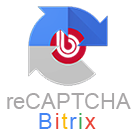
<style>
.page{position:relative;width:135px;height:135px;background:#ffffff}
.page>*{position:absolute;margin:0}
.t1{font:22px "ArialMT";color:#a9a7a8}
.t2{font:22px "ArialMT";letter-spacing:0.08em;color:#4285f4}
.t3{font:22px "ArialMT";letter-spacing:0.08em;color:#ea4335}
.t4{font:22px "ArialMT";letter-spacing:0.08em;color:#fbbc05}
.t5{font:22px "ArialMT";letter-spacing:0.08em;color:#34a853}
</style>
<div class="page">
<p class="t1" style="left:7px;top:93px;width:124px;height:16px">reCAPTCHA</p>
<p class="t2" style="left:39px;top:113px;width:57px;height:16px">B<span class="t3">i</span><span class="t4">t</span>r<span class="t5">i</span><span class="t3">x</span></p>
</div>
